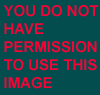
<style>
.page{position:relative;width:100px;height:95px;background:#034d4e}
.page>*{position:absolute;margin:0}
.t1{font:15px "Arial-BoldMT";color:#f50437;text-transform:uppercase}
</style>
<div class="page">
<p class="t1" style="left:3px;top:5px;width:96px;height:84px">You Do not <br>have <br>permission<br>to use this image</p>
</div>
